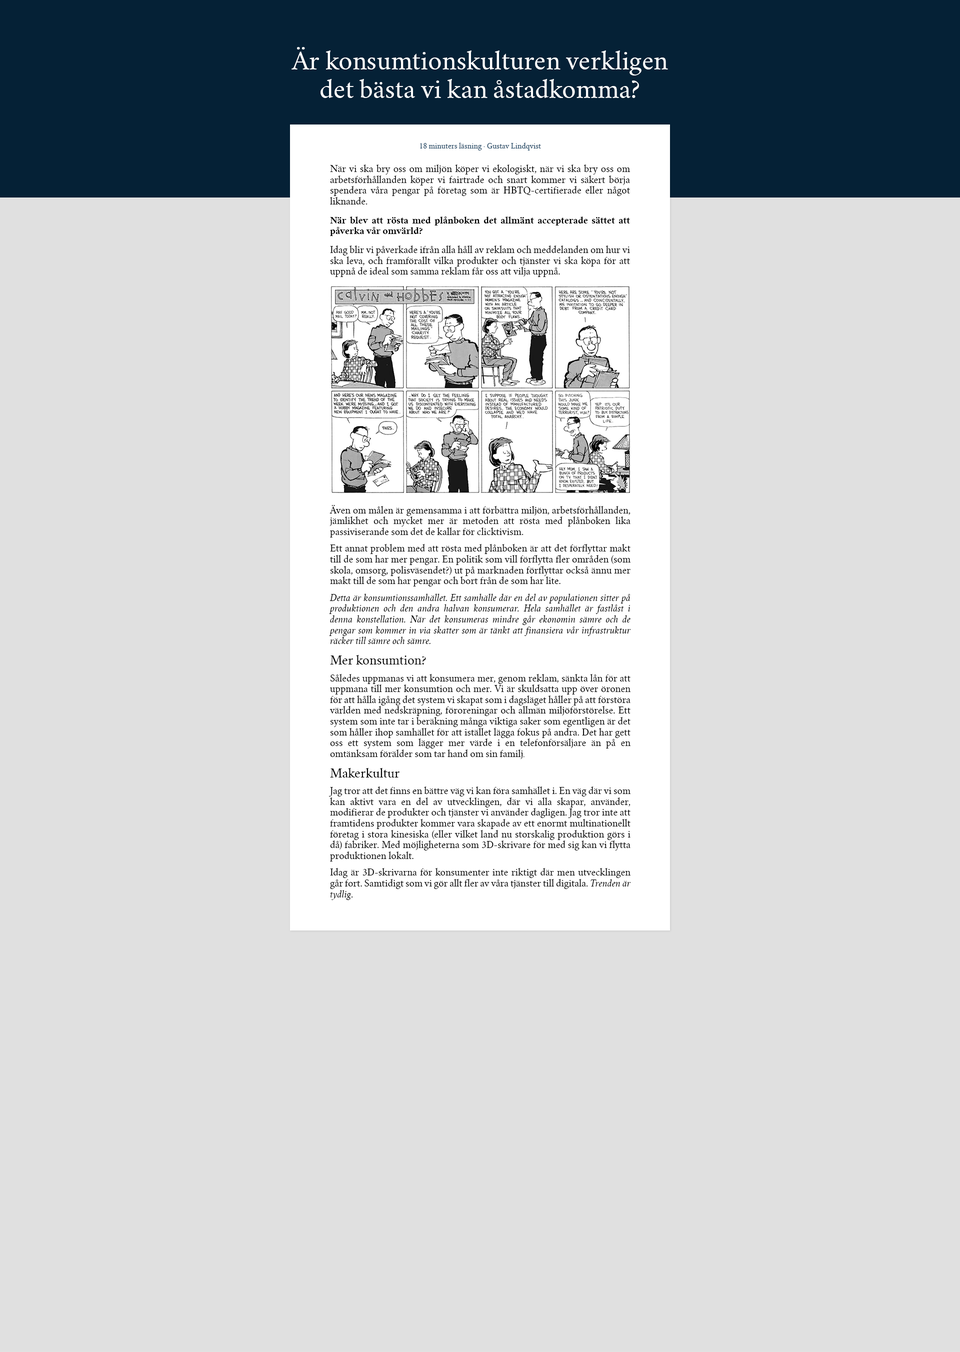
<style>
.page{position:relative;width:960px;height:1352px;background:#e0e0e0}
.page>*{position:absolute;margin:0}
.t1{font:24px "CrimsonText-Roman";color:#ffffff}
.t2{font:7px "CrimsonText-Roman";color:#234966}
.t3{font:9px "CrimsonText-Roman";color:#000000}
.t4{font:9px "CrimsonText-Bold";color:#000000}
.t5{font:9px "CrimsonText-Italic";color:#000000}
.t6{font:12px "CrimsonText-Roman";color:#000000}
.t7{font:7px "CrimsonText-Roman";color:#000000}
</style>
<div class="page">
<p class="t1" style="left:291px;top:47px;width:377px;height:51px;text-align:center">Är konsumtionskulturen verkligen det bästa vi kan åstadkomma?</p>
<p class="t2" style="left:420px;top:142px;width:121px;height:8px">18 minuters läsning · Gustav Lindqvist</p>
<p class="t3" style="left:330px;top:164px;width:300px;height:113px;text-align:justify">När vi ska bry oss om miljön köper vi ekologiskt, när vi ska bry oss om arbetsförhållanden köper vi fairtrade och snart kommer vi säkert börja spendera våra pengar på företag som är HBTQ-certifierade eller något liknande.<br><span class="t4">När blev att rösta med plånboken det allmänt accepterade sättet att påverka vår omvärld?<br></span>Idag blir vi påverkade ifrån alla håll av reklam och meddelanden om hur vi ska leva, och framförallt vilka produkter och tjänster vi ska köpa för att uppnå de ideal som samma reklam får oss att vilja uppnå.</p>
<p class="t3" style="left:328px;top:505px;width:302px;height:395px;text-align:justify">Även om målen är gemensamma i att förbättra miljön, arbetsförhållanden, jämlikhet och mycket mer är metoden att rösta med plånboken lika passiviserande som det de kallar för clicktivism.<br>Ett annat problem med att rösta med plånboken är att det förflyttar makt till de som har mer pengar. En politik som vill förflytta fler områden (som skola, omsorg, polisväsendet?) ut på marknaden förflyttar också ännu mer makt till de som har pengar och bort från de som har lite.<br><span class="t5">Detta är konsumtionssamhället. Ett samhälle där en del av populationen sitter på produktionen och den andra halvan konsumerar. Hela samhället är fastlåst i denna konstellation. När det konsumeras mindre går ekonomin sämre och de pengar som kommer in via skatter som är tänkt att finansiera vår infrastruktur räcker till sämre och sämre.<br></span><span class="t6">Mer konsumtion?<br></span>Således uppmanas vi att konsumera mer, genom reklam, sänkta lån för att uppmana till mer konsumtion och mer. Vi är skuldsatta upp över öronen för att hålla igång det system vi skapat som i dagsläget håller på att förstöra världen med nedskräpning, föroreningar och allmän miljöförstörelse. Ett system som inte tar i beräkning många viktiga saker som egentligen är det som håller ihop samhället för att istället lägga fokus på andra. Det har gett oss ett system som lägger mer värde i en telefonförsäljare än på en omtänksam förälder som tar hand om sin familj<span class="t7">.<br></span><span class="t6">Makerkultur<br></span>Jag tror att det finns en bättre väg vi kan föra samhället i. En väg där vi som kan aktivt vara en del av utvecklingen, där vi alla skapar, använder, modifierar de produkter och tjänster vi använder dagligen. Jag tror inte att framtidens produkter kommer vara skapade av ett enormt multinationellt företag i stora kinesiska (eller vilket land nu storskalig produktion görs i då) fabriker. Med möjligheterna som 3D-skrivare för med sig kan vi flytta produktionen lokalt.<br>Idag är 3D-skrivarna för konsumenter inte riktigt där men utvecklingen går fort. Samtidigt som vi gör allt fler av våra tjänster till digitala. <span class="t5">Trenden är tydlig</span>.</p>
</div>
